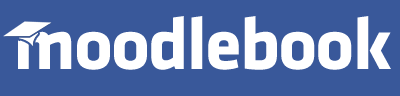
<style>
.page{position:relative;width:400px;height:96px;background:#39589a}
.page>*{position:absolute;margin:0}
.t1{font:75px "Klavika-Bold";letter-spacing:-0.025em;color:#ffffff}
</style>
<div class="page">
<p class="t1" style="left:18px;top:16px;width:373px;height:54px">moodlebook</p>
</div>
